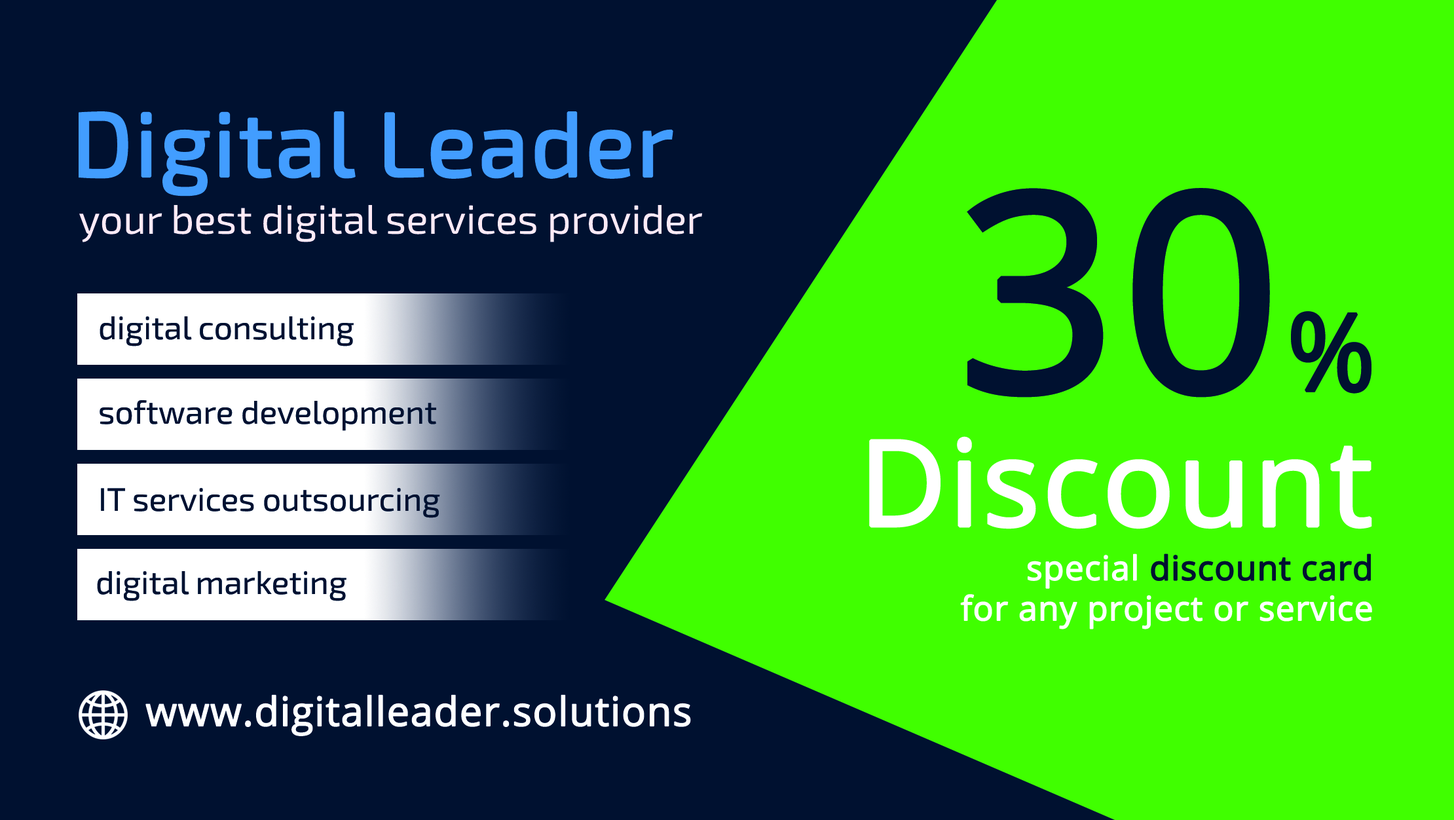
<style>
.page{position:relative;width:1454px;height:820px;background:#001130}
.page>*{position:absolute;margin:0}
.t1{font:91.1px "Exo2-Regular";color:#429dff;font-weight:bold}
.t2{font:274.3px "OpenSans";color:#001130;font-weight:bold}
.t3{font:107.5px "OpenSans";color:#001130;font-weight:bold}
.t4{font:40.7px "Exo2-Regular";color:#ffeaf5}
.t5{font:32.7px "Exo2-Regular";color:#001130}
.t6{font:119.1px "OpenSans";color:#ffffff;font-weight:bold}
.t7{font:33.7px "OpenSans";color:#ffffff;font-weight:bold}
.t8{font:33.7px "OpenSans";color:#001130;font-weight:bold}
.t9{font:40.2px "OpenSans";color:#ffffff;font-weight:bold}
</style>
<div class="page">
<p class="t1" style="left:79px;top:111px;width:594px;height:85px">Digital Leader</p>
<p class="t2" style="left:967px;top:188px;width:405px;height:210px">30<span class="t3">%</span></p>
<p class="t4" style="left:79px;top:205px;width:623px;height:37px">your best digital services provider</p>
<p class="t5" style="left:100px;top:316px;width:254px;height:30px">digital consulting</p>
<p class="t5" style="left:100px;top:400px;width:336px;height:31px">software development</p>
<p class="t6" style="left:869px;top:436px;width:503px;height:93px">Discount</p>
<p class="t5" style="left:101px;top:488px;width:339px;height:30px">IT services outsourcing</p>
<p class="t7" style="left:960px;top:553px;width:412px;height:76px;text-align:right">special <span class="t8">discount card</span><br>for any project or service</p>
<p class="t5" style="left:97px;top:571px;width:249px;height:30px">digital marketing</p>
<p class="t9" style="left:145px;top:694px;width:546px;height:42px">www.digitalleader.solutions</p>
</div>
